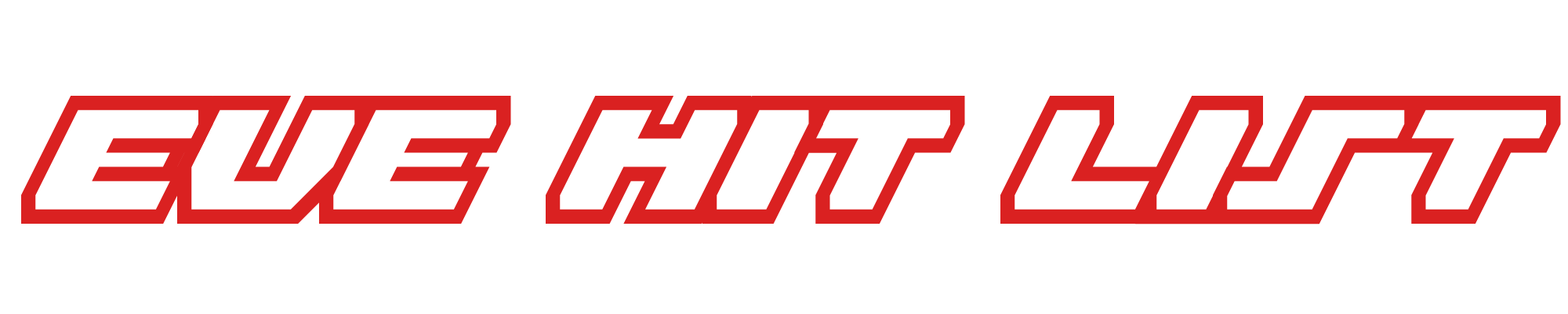
<style>
.page{position:relative;width:1568px;height:314px;background:#ffffff}
.page>*{position:absolute;margin:0}
.t1{font:227px "zapristi!-eYe/FS";color:#da2121}
</style>
<div class="page">
<p class="t1" style="left:21px;top:96px;width:1540px;height:128px">EVE HIT LIST</p>
</div>
